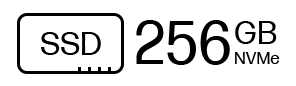
<style>
.page{position:relative;width:296px;height:86px;background:#ffffff}
.page>*{position:absolute;margin:0}
.t1{font:60px "FormaDJRMicro-Regular";color:#000000}
.t2{font:32px "FormaDJRMicro-Regular";color:#000000}
.t3{font:17px "FormaDJRMicro-Regular";color:#000000}
</style>
<div class="page">
<p class="t1" style="left:136px;top:20px;width:94px;height:45px">256</p>
<p class="t2" style="left:235px;top:21px;width:42px;height:23px">GB</p>
<p class="t2" style="left:41px;top:32px;width:60px;height:23px">SSD</p>
<p class="t3" style="left:235px;top:52px;width:45px;height:12px">NVMe</p>
</div>
